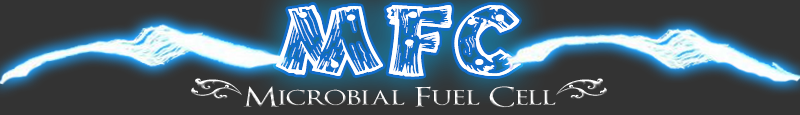
<style>
.page{position:relative;width:800px;height:115px;background:#333333}
.page>*{position:absolute;margin:0}
.t1{font:85px "DriftType";color:#ffffff;scale:1.34 1}
.t2{font:27px "OptimusPrinceps";scale:1.34 1}
.t3{font:45px "RioGrande-Bold";scale:1.34 1}
</style>
<div class="page">
<p class="t1" style="left:275px;top:5px;width:246px;height:72px">MFC</p>
<p class="t1" style="left:276px;top:5px;width:245px;height:72px">MFC</p>
<p class="t2" style="left:191px;top:78px;width:416px;height:30px"><span class="t3">(</span>Microbial Fuel Cell<span class="t3">)</span></p>
</div>
